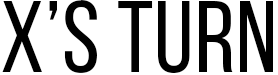
<style>
.page{position:relative;width:278px;height:75px;background:#ffffff}
.page>*{position:absolute;margin:0}
.t1{font:101.3px "BebasNeueRegular";letter-spacing:0.01em;color:#000000}
</style>
<div class="page">
<p class="t1" style="left:2px;top:0px;width:271px;height:73px">X’s turn</p>
</div>
